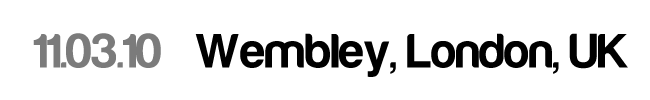
<style>
.page{position:relative;width:650px;height:100px;background:#ffffff}
.page>*{position:absolute;margin:0}
.t1{font:50px "Harabara-Bold";color:#000000}
.t2{font:50px "Harabara-Bold";color:#7b7b7b}
</style>
<div class="page">
<p class="t1" style="left:33px;top:33px;width:595px;height:44px"><span class="t2"> 11.03.10</span>   Wembley, London, UK</p>
</div>
